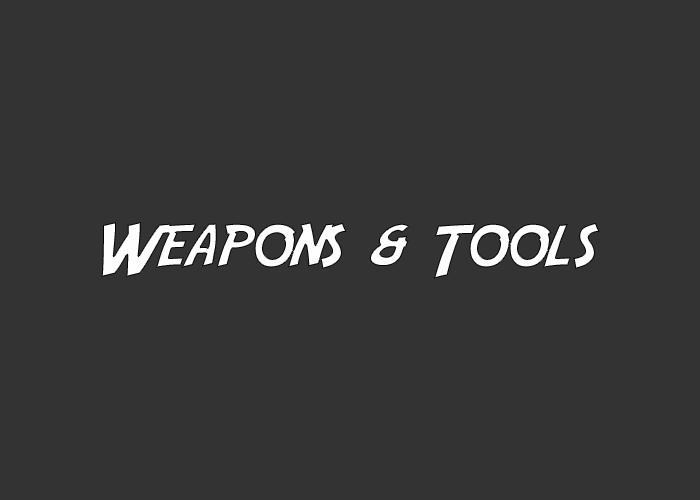
<style>
.page{position:relative;width:700px;height:500px;background:#333333}
.page>*{position:absolute;margin:0}
.t1{font:73px "Adventure";color:#fffefe}
</style>
<div class="page">
<p class="t1" style="left:101px;top:222px;width:499px;height:57px">Weapons &amp; Tools</p>
</div>
